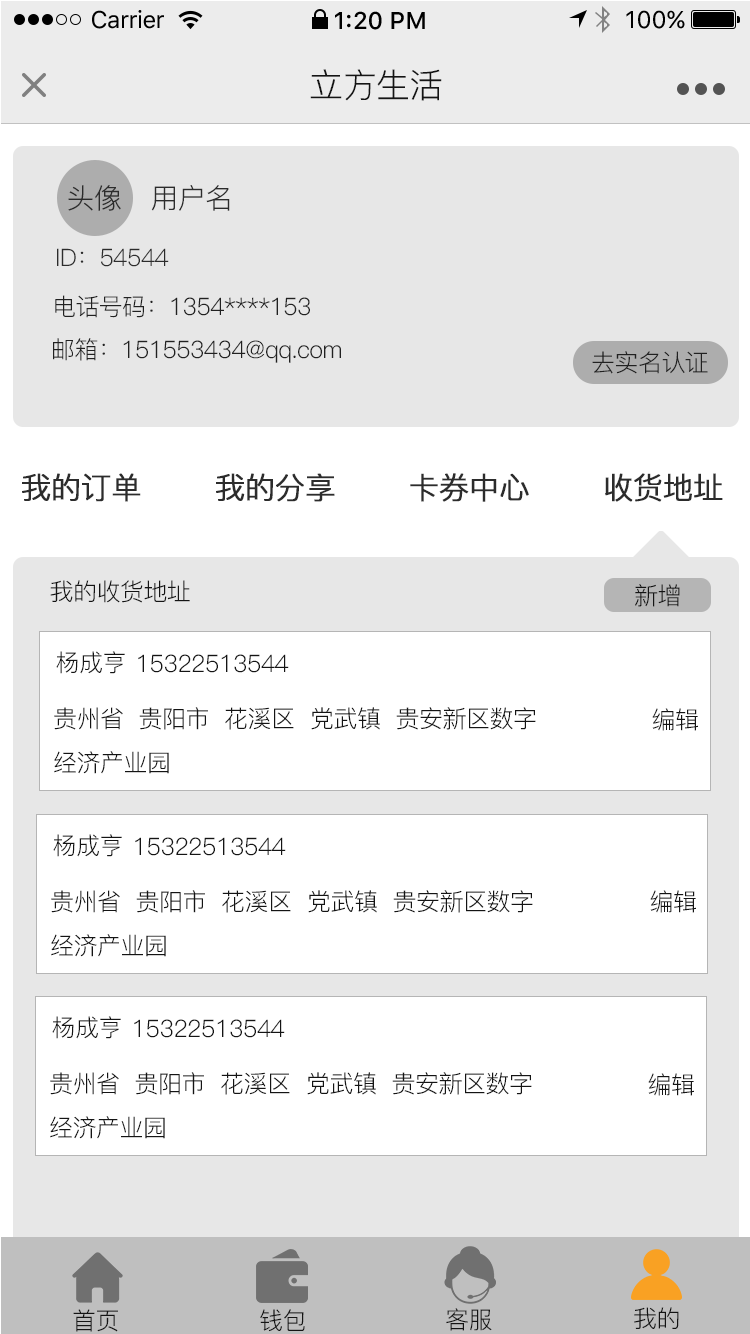
<style>
.page{position:relative;width:750px;height:1334px;background:#ffffff}
.page>*{position:absolute;margin:0}
.t1{font:24px "SFUIText-Regular";letter-spacing:-0.025em;color:#000000}
.t2{font:24px "SFUIText-Medium";color:#000000}
.t3{font:24px "SFUIText-Regular";color:#000000}
.t4{font:34px "PingFang-SC-Regular";letter-spacing:-0.02em;color:#141414}
.t5{font:28px "PingFang-SC-Regular";letter-spacing:-0.024em;color:#2c2c2c}
.t6{font:24px "PingFang-SC-Regular";letter-spacing:-0.024em;color:#2c2c2c}
.t7{font:24px "PingFang-SC-Regular";letter-spacing:-0.024em;color:#212121}
.t8{font:30px "PingFang-SC-Regular";letter-spacing:-0.024em;color:#2c2c2c;font-weight:bold}
.t9{font:24px "PingFang-SC-Regular";letter-spacing:-0.02em;color:#141414}
.t10{font:24px/44px "PingFang-SC-Regular";letter-spacing:-0.02em;color:#141414}
</style>
<div class="page">
<p class="t1" style="left:92px;top:10px;width:72px;height:19px">Carrier</p>
<p class="t2" style="left:335px;top:11px;width:90px;height:19px">1:20 PM</p>
<p class="t3" style="left:626px;top:10px;width:59px;height:19px">100%</p>
<p class="t4" style="left:310px;top:69px;width:132px;height:32px">立方生活</p>
<p class="t5" style="left:68px;top:185px;width:53px;height:26px">头像</p>
<p class="t5" style="left:151px;top:185px;width:79px;height:26px">用户名</p>
<p class="t6" style="left:57px;top:248px;width:112px;height:19px">ID：54544</p>
<p class="t7" style="left:55px;top:295px;width:255px;height:23px">电话号码：1354****153</p>
<p class="t7" style="left:53px;top:338px;width:288px;height:25px">邮箱：151553434@qq.com</p>
<p class="t7" style="left:592px;top:351px;width:116px;height:23px">去实名认证</p>
<p class="t8" style="left:22px;top:473px;width:119px;height:29px">我的订单</p>
<p class="t8" style="left:216px;top:473px;width:119px;height:29px">我的分享</p>
<p class="t8" style="left:410px;top:473px;width:119px;height:29px">卡券中心</p>
<p class="t8" style="left:605px;top:473px;width:118px;height:29px">收货地址</p>
<p class="t9" style="left:50px;top:580px;width:140px;height:23px">我的收货地址</p>
<p class="t9" style="left:635px;top:584px;width:45px;height:23px">新增</p>
<p class="t9" style="left:56px;top:651px;width:69px;height:23px">杨成亨</p>
<p class="t9" style="left:138px;top:654px;width:151px;height:19px">15322513544</p>
<p class="t10" style="left:54px;top:707px;width:482px;height:67px">贵州省  贵阳市  花溪区  党武镇  贵安新区数字<br>经济产业园</p>
<p class="t9" style="left:652px;top:708px;width:46px;height:23px">编辑</p>
<p class="t9" style="left:53px;top:834px;width:69px;height:23px">杨成亨</p>
<p class="t9" style="left:135px;top:837px;width:151px;height:19px">15322513544</p>
<p class="t10" style="left:51px;top:890px;width:482px;height:67px">贵州省  贵阳市  花溪区  党武镇  贵安新区数字<br>经济产业园</p>
<p class="t9" style="left:650px;top:890px;width:46px;height:23px">编辑</p>
<p class="t9" style="left:52px;top:1016px;width:69px;height:23px">杨成亨</p>
<p class="t9" style="left:134px;top:1019px;width:151px;height:19px">15322513544</p>
<p class="t10" style="left:50px;top:1072px;width:482px;height:67px">贵州省  贵阳市  花溪区  党武镇  贵安新区数字<br>经济产业园</p>
<p class="t9" style="left:648px;top:1073px;width:46px;height:23px">编辑</p>
<p class="t9" style="left:73px;top:1309px;width:45px;height:23px">首页</p>
<p class="t9" style="left:260px;top:1309px;width:45px;height:23px">钱包</p>
<p class="t9" style="left:446px;top:1308px;width:46px;height:23px">客服</p>
<p class="t9" style="left:634px;top:1307px;width:45px;height:22px">我的</p>
</div>
